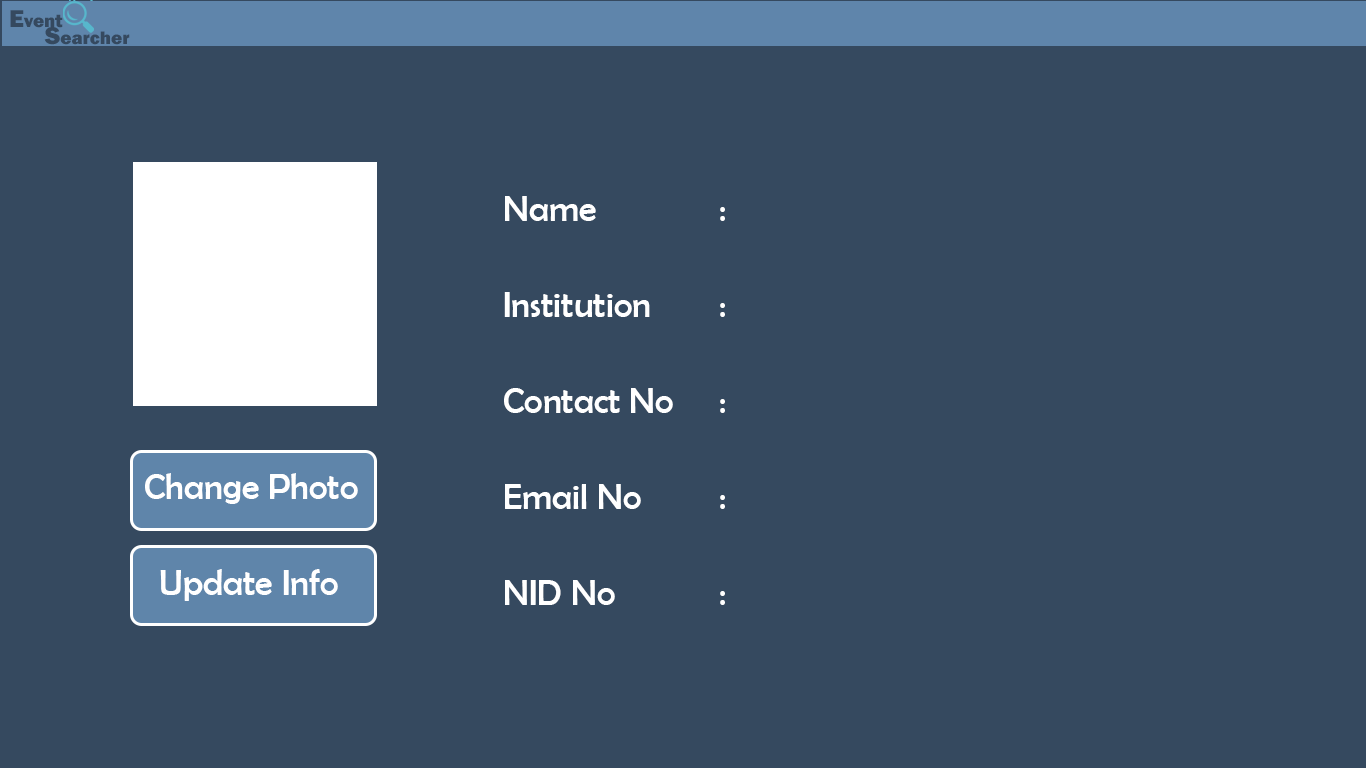
<style>
.page{position:relative;width:1366px;height:768px;background:#35495f}
.page>*{position:absolute;margin:0}
.t1{font:18.8px "FranklinGothic-Heavy";color:#35495f}
.t2{font:25.1px "FranklinGothic-Heavy";color:#35495f}
.t3{font:36px/48px "BerlinSansFB-Reg";color:#ffffff}
.t4{font:36px "BerlinSansFB-Reg";color:#ffffff}
</style>
<div class="page">
<p class="t1" style="left:10px;top:10px;width:53px;height:18px"><span class="t2">E</span>vent</p>
<p class="t1" style="left:44px;top:27px;width:86px;height:18px"><span class="t2">S</span>earcher</p>
<p class="t3" style="left:504px;top:196px;width:221px;height:409px">Name    :<br><br>Institution  :<br><br>Contact No   :<br><br>Email No   :<br><br>NID No    :</p>
<p class="t4" style="left:145px;top:473px;width:213px;height:31px">Change Photo</p>
<p class="t4" style="left:160px;top:569px;width:178px;height:32px">Update Info</p>
</div>
